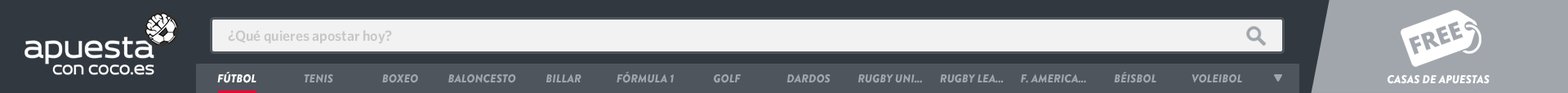
<style>
.page{position:relative;width:1568px;height:93px;background:#313840}
.page>*{position:absolute;margin:0}
.t1{font:14.7px "Whitney-Semibold";color:#c6c7c8}
.t2{font:11.4px "BrandonGrotesque-BlackItalic";color:#ffffff;text-transform:uppercase}
.t3{font:11.4px "BrandonGrotesque-BlackItalic";color:#a1a6ac;text-transform:uppercase}
</style>
<div class="page">
<p class="t1" style="left:228px;top:30px;width:164px;height:14px">¿Qué quieres apostar hoy?</p>
<p class="t2" style="left:217px;top:71px;width:39px;height:12px">Fútbol</p>
<p class="t3" style="left:304px;top:74px;width:29px;height:9px">Tenis</p>
<p class="t3" style="left:382px;top:74px;width:36px;height:9px">Boxeo</p>
<p class="t3" style="left:448px;top:74px;width:68px;height:9px">Baloncesto</p>
<p class="t3" style="left:546px;top:74px;width:35px;height:8px">Billar</p>
<p class="t3" style="left:617px;top:71px;width:57px;height:12px">Fórmula 1</p>
<p class="t3" style="left:714px;top:74px;width:27px;height:9px">Golf</p>
<p class="t3" style="left:786px;top:74px;width:45px;height:9px">Dardos</p>
<p class="t3" style="left:858px;top:74px;width:64px;height:9px">RUGBY UNI...</p>
<p class="t3" style="left:940px;top:74px;width:64px;height:9px">RUGBY LEa...</p>
<p class="t3" style="left:1021px;top:74px;width:65px;height:9px">F. America...</p>
<p class="t3" style="left:1114px;top:72px;width:42px;height:11px">Béisbol</p>
<p class="t3" style="left:1192px;top:74px;width:50px;height:9px">VOLEIBOL</p>
<p class="t2" style="left:1388px;top:75px;width:102px;height:9px">CASAS DE APUESTAS</p>
</div>
